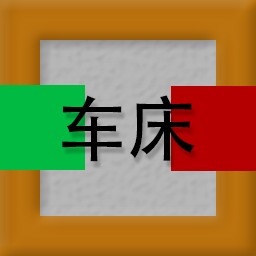
<style>
.page{position:relative;width:256px;height:256px}
.page>*{position:absolute;margin:0}
.t1{font:71px "AdobeHeitiStd-Regular";color:#000000}
</style>
<div class="page">
<p class="t1" style="left:62px;top:95px;width:133px;height:67px">车床</p>
</div>
